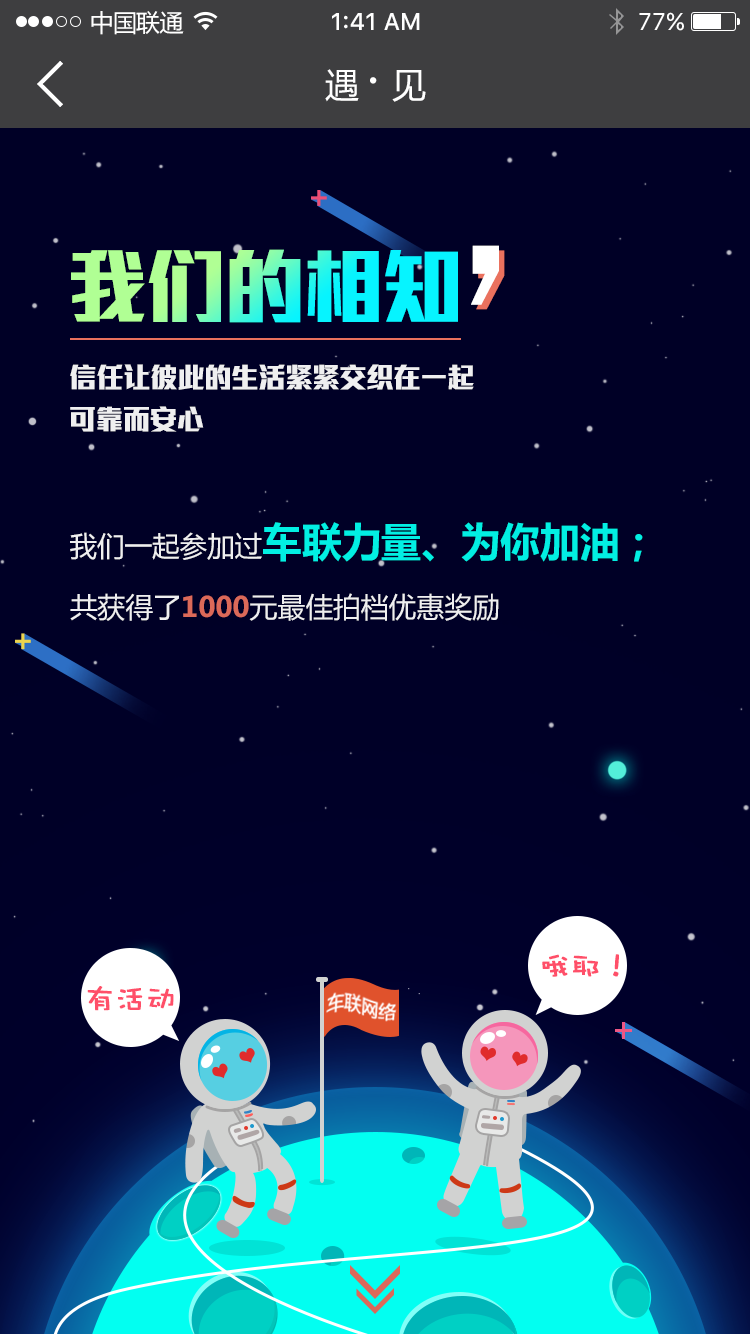
<style>
.page{position:relative;width:750px;height:1334px;background:#000026}
.page>*{position:absolute;margin:0}
.t1{font:24px "MicrosoftYaHei";letter-spacing:-0.025em;color:#ffffff}
.t2{font:24px "SFUIText-Medium";color:#ffffff}
.t3{font:24px "SFUIText-Regular";color:#ffffff}
.t4{font:34px "MicrosoftYaHei";letter-spacing:-0.025em;color:#ffffff}
.t5{font:50px "MicrosoftYaHei";letter-spacing:-0.025em;color:#ffffff}
.t6{font:239.7px "WenQuanYiZenHei";letter-spacing:-0.04em;color:#ffffff}
.t7{font:81.8px "MStiffHeiPRC-UltraBold";letter-spacing:-0.025em}
.t8{font:239.7px "WenQuanYiZenHei";letter-spacing:-0.04em}
.t9{font:28px "MStiffHeiPRC-UltraBold";letter-spacing:-0.025em;color:#ffffff}
.t10{font:40.4px "MicrosoftYaHei-Bold";color:#02fff1}
.t11{font:28px "MicrosoftYaHei";color:#ffffff}
.t12{font:28px "MicrosoftYaHei-Bold";color:#ea715e}
.t13{font:30px "DFPWaWaW5";color:#ff4f69;font-weight:bold}
</style>
<div class="page">
<p class="t1" style="left:91px;top:11px;width:93px;height:24px">中国联通</p>
<p class="t2" style="left:332px;top:13px;width:88px;height:17px">1:41 AM</p>
<p class="t3" style="left:639px;top:12px;width:45px;height:19px">77%</p>
<p class="t4" style="left:325px;top:69px;width:101px;height:33px">遇 <span class="t5">· </span>见</p>
<p class="t6" style="left:471px;top:245px;width:28px;height:60px">，</p>
<p class="t7" style="left:71px;top:249px;width:387px;height:74px">我们的相知</p>
<p class="t8" style="left:476px;top:250px;width:29px;height:60px">，</p>
<p class="t9" style="left:70px;top:364px;width:404px;height:26px;opacity:0.9">信任让彼此的生活紧紧交织在一起</p>
<p class="t9" style="left:70px;top:406px;width:134px;height:26px;opacity:0.9">可靠而安心</p>
<p class="t10" style="left:70px;top:522px;width:573px;height:40px;opacity:0.9"><span class="t11">我们一起参加过</span>车联力量、为你加油；</p>
<p class="t11" style="left:70px;top:593px;width:429px;height:28px;opacity:0.9">共获得了<span class="t12">1000</span>元最佳拍档优惠奖励</p>
<p class="t13" style="left:542px;top:954px;width:77px;height:23px">哦耶！</p>
<p class="t13" style="left:87px;top:986px;width:87px;height:25px">有活动</p>
</div>
